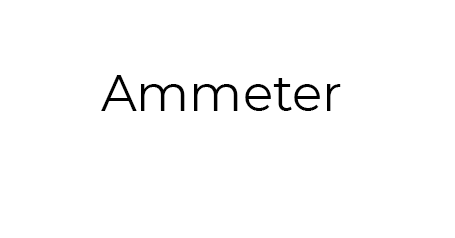
<style>
.page{position:relative;width:455px;height:238px;background:#ffffff}
.page>*{position:absolute;margin:0}
.t1{font:50px "Montserrat-Regular";color:#000000}
</style>
<div class="page">
<p class="t1" style="left:101px;top:75px;width:240px;height:36px">Ammeter</p>
</div>
